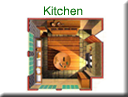
<style>
.page{position:relative;width:128px;height:97px;background:#ffffff}
.page>*{position:absolute;margin:0}
.t1{font:18px "CordiaNew";color:#006600}
</style>
<div class="page">
<p class="t1" style="left:44px;top:6px;width:39px;height:10px">Kitchen</p>
</div>
